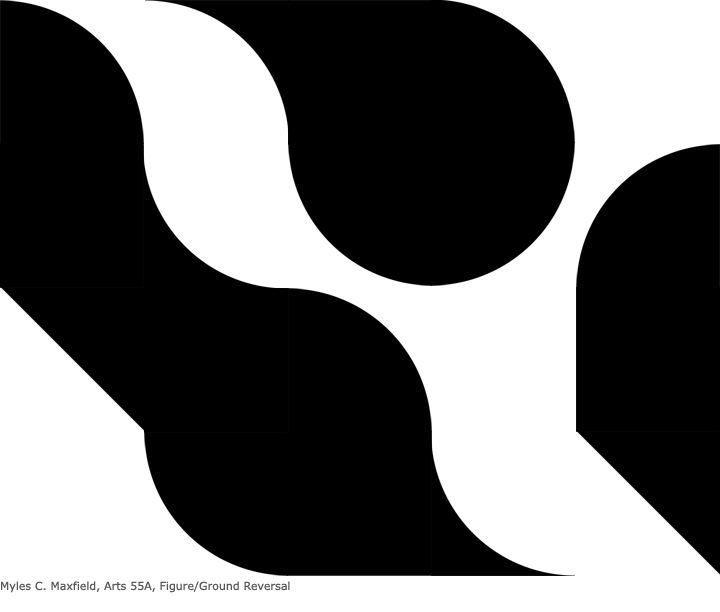
<style>
.page{position:relative;width:720px;height:612px;background:#000000}
.page>*{position:absolute;margin:0}
.t1{font:11px "Verdana";color:#595959}
</style>
<div class="page">
<p class="t1" style="left:1px;top:581px;width:289px;height:12px">Myles C. Maxfield, Arts 55A, Figure/Ground Reversal</p>
</div>
